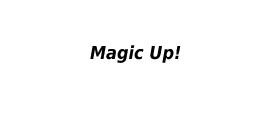
<style>
.page{position:relative;width:280px;height:120px;background:#ffffff}
.page>*{position:absolute;margin:0}
.t1{font:18px "DejaVuSansCondensed-BoldOblique";color:#020202}
</style>
<div class="page">
<p class="t1" style="left:90px;top:45px;width:91px;height:18px">Magic Up!</p>
</div>
